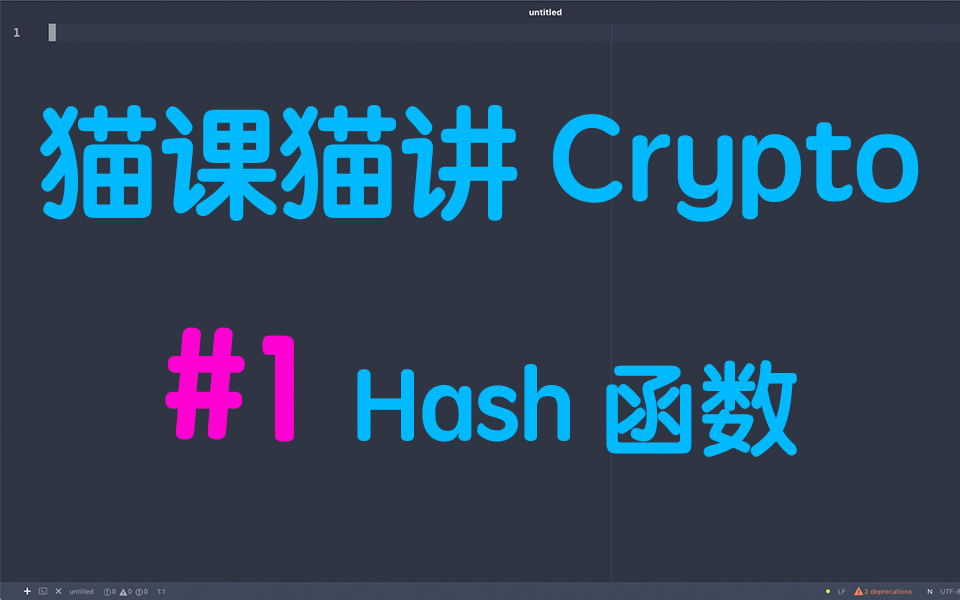
<style>
.page{position:relative;width:960px;height:600px;background:#2f3543}
.page>*{position:absolute;margin:0}
.t1{font:120px "STYuanti-SC-Bold";color:#00b9fe}
.t2{font:100px "STYuanti-SC-Bold";color:#00b9fe}
.t3{font:150px "STYuanti-SC-Bold";color:#fe00d1}
</style>
<div class="page">
<p class="t1" style="left:40px;top:104px;width:879px;height:118px">猫课猫讲 Crypto</p>
<p class="t2" style="left:165px;top:327px;width:632px;height:130px"><span class="t3">#1</span>  Hash 函数</p>
</div>
